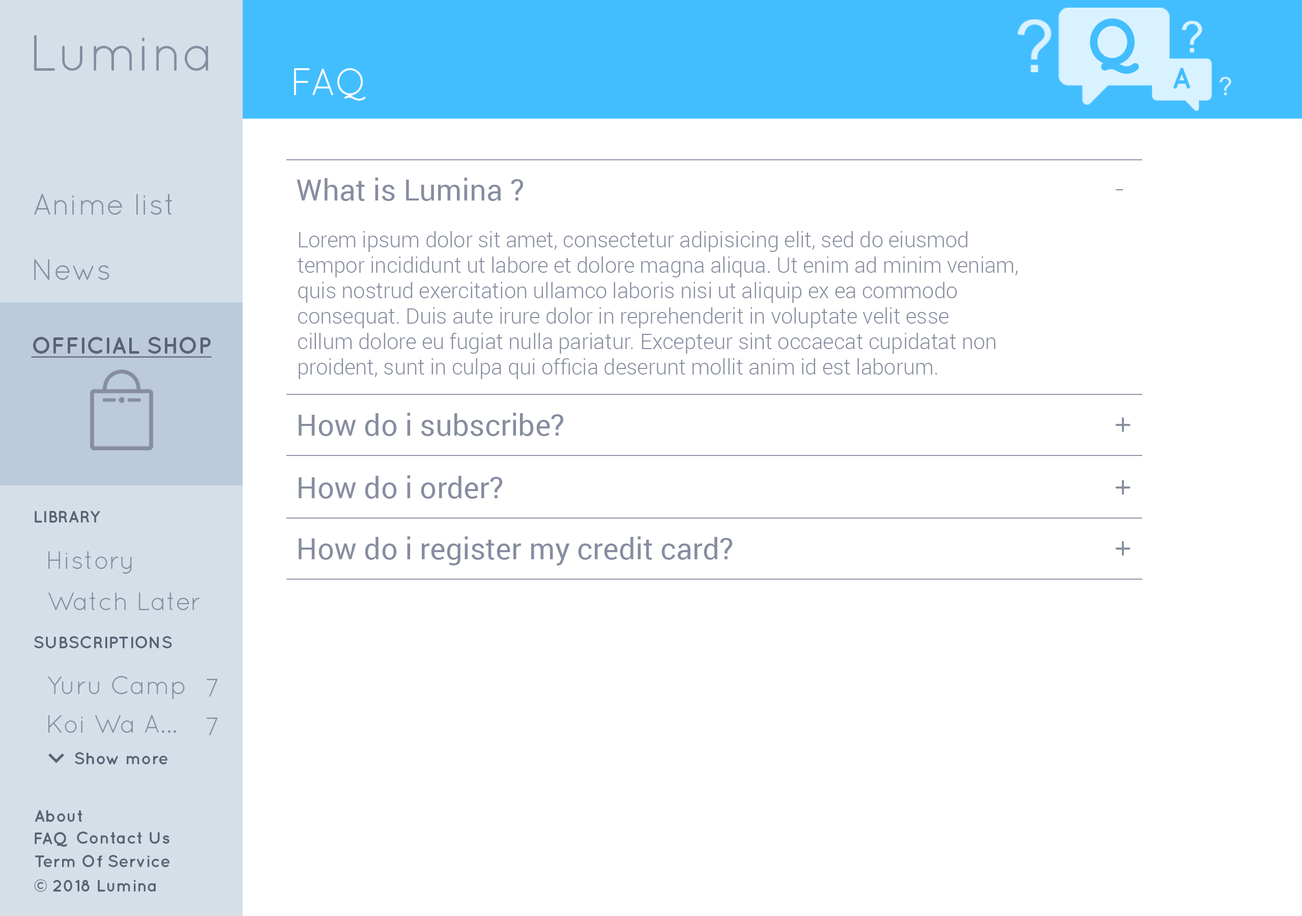
<style>
.page{position:relative;width:1302px;height:916px;background:#ffffff}
.page>*{position:absolute;margin:0}
.t1{font:63.6px "Quicksand-Bold";color:#42beff}
.t2{font:50.9px "QuicksandBook-Regular";color:#878da0}
.t3{font:38.2px "Quicksand-Regular";color:#ffffff}
.t4{font:29.7px "Quicksand-Bold";color:#42beff}
.t5{font:29.7px "Roboto-Regular";color:#878da0}
.t6{font:29.7px "Quicksand-Regular";color:#878da0}
.t7{font:21.2px "Roboto-Light";color:#878da0}
.t8{font:29.7px "QuicksandBook-Regular";color:#878da0}
.t9{font:23.3px "QuicksandBold-Regular";color:#5c6275;text-decoration:underline}
.t10{font:17px "QuicksandBold-Regular";color:#5c6275}
.t11{font:25.4px "QuicksandBook-Regular";color:#878da0}
.t12{font:17px "Quicksand-Bold";color:#5c6275}
</style>
<div class="page">
<p class="t1" style="left:1090px;top:18px;width:49px;height:56px">Q</p>
<p class="t2" style="left:34px;top:35px;width:174px;height:36px">Lumina</p>
<p class="t3" style="left:294px;top:68px;width:72px;height:33px">FAQ</p>
<p class="t4" style="left:1173px;top:68px;width:17px;height:21px">A</p>
<p class="t5" style="left:297px;top:178px;width:227px;height:23px">What is Lumina ?</p>
<p class="t6" style="left:34px;top:194px;width:138px;height:21px">Anime list</p>
<p class="t6" style="left:1115px;top:189px;width:8px;height:1px">-</p>
<p class="t7" style="left:297px;top:231px;width:721px;height:148px">Lorem ipsum dolor sit amet, consectetur adipisicing elit, sed do eiusmod<br>tempor incididunt ut labore et dolore magna aliqua. Ut enim ad minim veniam,<br>quis nostrud exercitation ullamco laboris nisi ut aliquip ex ea commodo<br>consequat. Duis aute irure dolor in reprehenderit in voluptate velit esse<br>cillum dolore eu fugiat nulla pariatur. Excepteur sint occaecat cupidatat non<br>proident, sunt in culpa qui officia deserunt mollit anim id est laborum.</p>
<p class="t8" style="left:34px;top:259px;width:75px;height:21px">News</p>
<p class="t9" style="left:31px;top:337px;width:181px;height:21px">OFFICIAL SHOP</p>
<p class="t5" style="left:299px;top:413px;width:265px;height:23px">How do i subscribe?</p>
<p class="t6" style="left:1115px;top:417px;width:16px;height:15px">+</p>
<p class="t5" style="left:299px;top:475px;width:204px;height:24px">How do i order?</p>
<p class="t6" style="left:1115px;top:480px;width:16px;height:15px">+</p>
<p class="t10" style="left:35px;top:511px;width:65px;height:12px">LIBRARY</p>
<p class="t5" style="left:299px;top:536px;width:434px;height:29px">How do i register my credit card?</p>
<p class="t6" style="left:1115px;top:541px;width:16px;height:15px">+</p>
<p class="t11" style="left:48px;top:551px;width:84px;height:23px">History</p>
<p class="t11" style="left:48px;top:592px;width:152px;height:18px">Watch Later</p>
<p class="t10" style="left:34px;top:636px;width:138px;height:12px">SUBSCRIPTIONS</p>
<p class="t11" style="left:48px;top:676px;width:137px;height:23px">Yuru Camp</p>
<p class="t11" style="left:207px;top:679px;width:11px;height:18px">7</p>
<p class="t11" style="left:48px;top:715px;width:128px;height:18px">Koi Wa A...</p>
<p class="t11" style="left:207px;top:717px;width:11px;height:18px">7</p>
<p class="t12" style="left:75px;top:752px;width:92px;height:12px">Show more</p>
<p class="t12" style="left:35px;top:810px;width:47px;height:12px">About</p>
<p class="t12" style="left:35px;top:832px;width:32px;height:15px">FAQ</p>
<p class="t12" style="left:77px;top:831px;width:92px;height:13px">Contact Us</p>
<p class="t12" style="left:35px;top:855px;width:134px;height:12px">Term Of Service</p>
<p class="t12" style="left:34px;top:879px;width:122px;height:13px">© 2018 Lumina</p>
</div>
